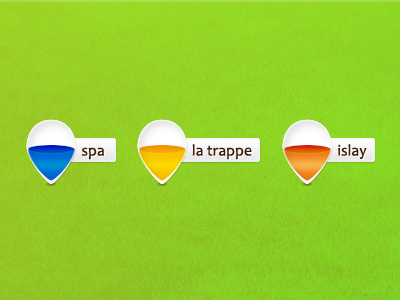
<style>
.page{position:relative;width:400px;height:300px}
.page>*{position:absolute;margin:0}
.t1{font:16px "Candara";color:#3b1b08}
</style>
<div class="page">
<p class="t1" style="left:81px;top:147px;width:23px;height:13px">spa</p>
<p class="t1" style="left:192px;top:144px;width:60px;height:16px">la trappe</p>
<p class="t1" style="left:338px;top:144px;width:29px;height:15px">islay</p>
</div>
